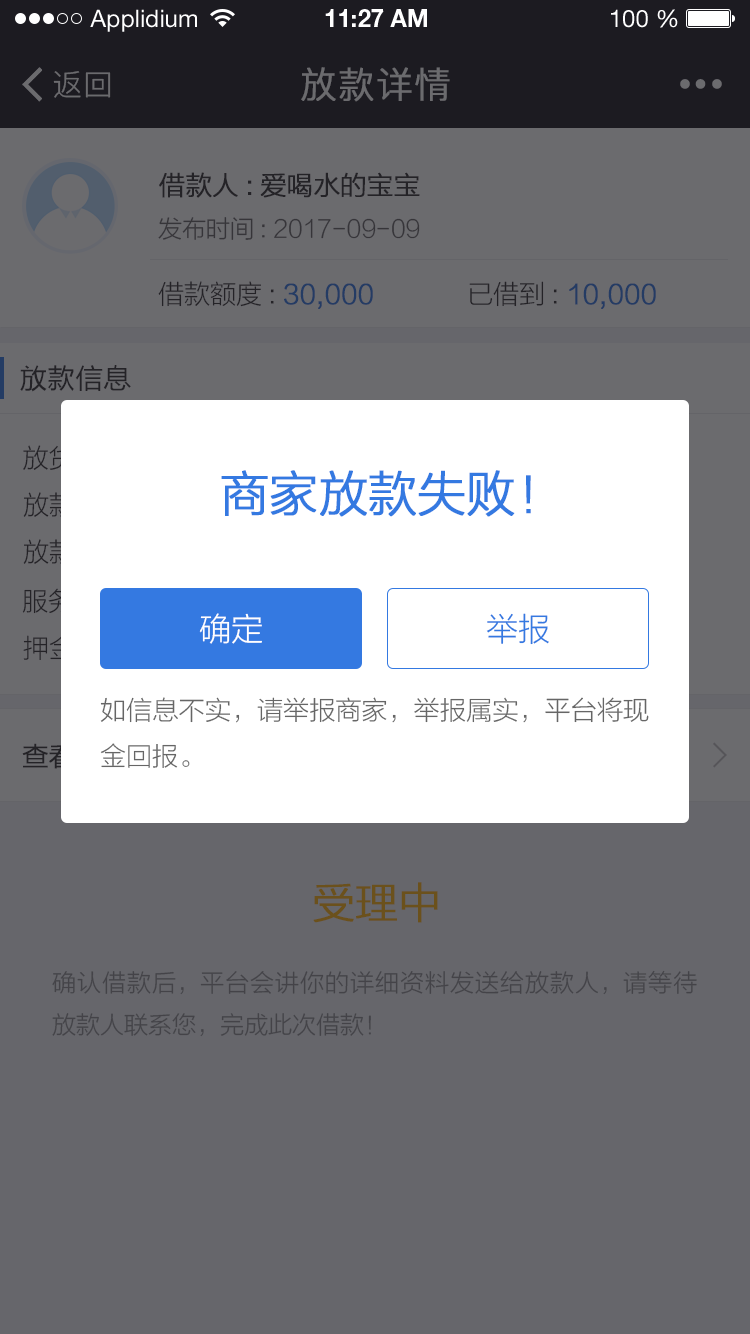
<style>
.page{position:relative;width:750px;height:1334px;background:#66666b}
.page>*{position:absolute;margin:0}
.t1{font:24px "HelveticaNeueLTStd-Roman";color:#ffffff}
.t2{font:24px "HelveticaNeueLTStd-Bd";color:#ffffff}
.t3{font:30px "PingFang-SC-Regular";letter-spacing:0.025em;color:#6b6b6e}
.t4{font:36px "PingFang-SC-Regular";letter-spacing:0.025em;color:#6b6b6e;font-weight:bold}
.t5{font:26px "FZLTXHK--GBK1-0";color:#333333;font-weight:bold}
.t6{font:24px "FZLTXHK--GBK1-0";color:#363539}
.t7{font:26px "FZLTXHK--GBK1-0";font-weight:bold}
.t8{font:26px "FZLTXHK--GBK1-0"}
.t9{font:28px "FZLTH_YS_GBK";color:#333333}
.t10{font:48px "FZLTXHK--GBK1-0";color:#3479e1;font-weight:bold}
.t11{font:32px "FZLTXHK--GBK1-0";color:#ffffff}
.t12{font:32px "FZLTXHK--GBK1-0";color:#3479e1}
.t13{font:26px "FZLTXHK--GBK1-0";color:#666666}
.t14{font:42px "FZLTXHK--GBK1-0";color:#6b511c;font-weight:bold}
.t15{font:24px "FZLTXHK--GBK1-0";color:#444348}
</style>
<div class="page">
<p class="t1" style="left:90px;top:9px;width:107px;height:23px">Applidium</p>
<p class="t2" style="left:325px;top:9px;width:102px;height:18px">11:27 AM</p>
<p class="t1" style="left:611px;top:9px;width:67px;height:19px">100 %</p>
<p class="t3" style="left:53px;top:71px;width:58px;height:27px">返回</p>
<p class="t4" style="left:301px;top:67px;width:149px;height:35px">放款详情</p>
<p class="t5" style="left:159px;top:172px;width:261px;height:26px">借款人:爱喝水的宝宝</p>
<p class="t6" style="left:158px;top:217px;width:262px;height:23px">发布时间: 2017-09-09</p>
<p class="t7" style="left:158px;top:281px;width:215px;height:28px"><span class="t8">借款额度: </span>30,000</p>
<p class="t7" style="left:469px;top:281px;width:187px;height:28px"><span class="t8">已借到: </span>10,000</p>
<p class="t9" style="left:20px;top:365px;width:111px;height:27px">放款信息</p>
<p class="t10" style="left:221px;top:470px;width:310px;height:47px">商家放款失败！</p>
<p class="t8" style="left:22px;top:588px;width:114px;height:26px">服务: <span class="t7">1%</span></p>
<p class="t11" style="left:199px;top:613px;width:63px;height:31px">确定</p>
<p class="t12" style="left:486px;top:613px;width:63px;height:32px">举报</p>
<p class="t13" style="left:100px;top:697px;width:549px;height:71px;text-align:justify">如信息不实，请举报商家，举报属实，平台将现金回报。</p>
<p class="t14" style="left:313px;top:882px;width:125px;height:41px">受理中</p>
<p class="t15" style="left:52px;top:970px;width:645px;height:67px;text-align:justify">确认借款后，平台会讲你的详细资料发送给放款人，请等待放款人联系您，完成此次借款！</p>
</div>
